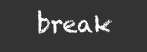
<style>
.page{position:relative;width:147px;height:52px;background:#333333}
.page>*{position:absolute;margin:0}
.t1{font:24px "Chalkduster";letter-spacing:-0.02em;color:#fcfafa}
</style>
<div class="page">
<p class="t1" style="left:38px;top:10px;width:74px;height:24px">break</p>
</div>
